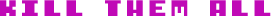
<style>
.page{position:relative;width:271px;height:16px;background:#ffffff}
.page>*{position:absolute;margin:0}
.t1{font:25px "I-pixel-u";letter-spacing:0.14em;color:#c009b6}
</style>
<div class="page">
<p class="t1" style="left:0px;top:0px;width:271px;height:16px">KILL THEM ALL</p>
</div>
